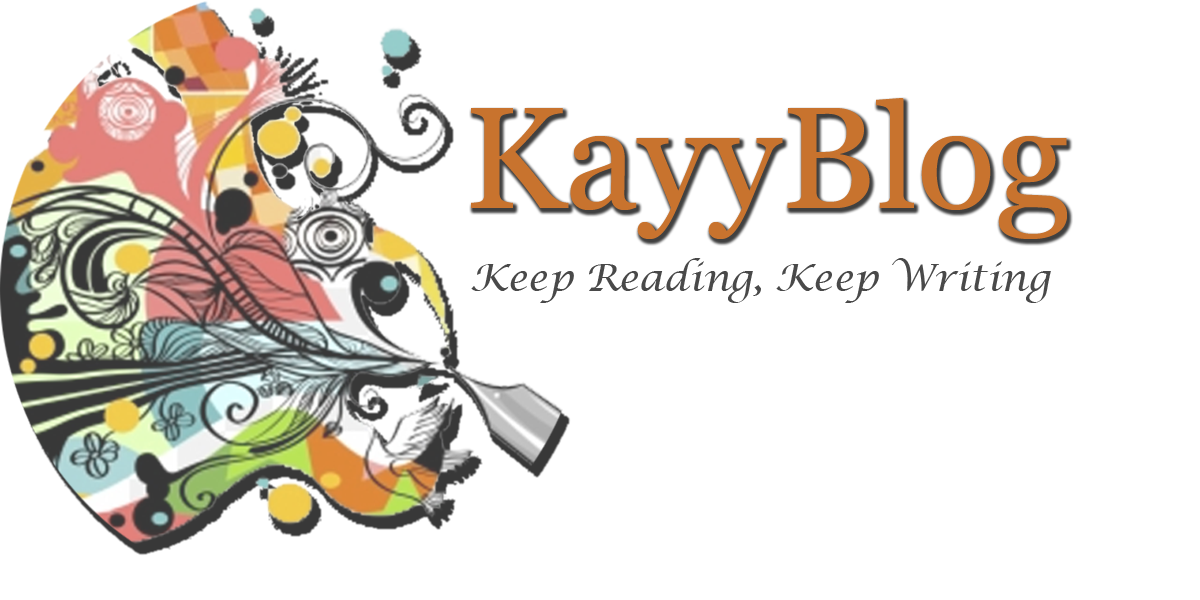
<style>
.page{position:relative;width:1200px;height:600px;background:#ffffff}
.page>*{position:absolute;margin:0}
.t1{font:145.2px "Georgia";color:#c8732e}
.t2{font:37.5px "LucidaCalligraphy-Italic";color:#494949}
</style>
<div class="page">
<p class="t1" style="left:471px;top:98px;width:596px;height:141px">KayyBlog</p>
<p class="t2" style="left:471px;top:258px;width:580px;height:45px">Keep Reading, Keep Writing</p>
</div>
